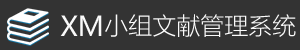
<style>
.page{position:relative;width:300px;height:50px;background:#333333}
.page>*{position:absolute;margin:0}
.t1{font:27px "MicrosoftYaHeiUI";color:#fafafa}
.t2{font:24px "MicrosoftYaHeiUILight";color:#fafafa}
</style>
<div class="page">
<p class="t1" style="left:60px;top:15px;width:42px;height:21px">XM</p>
<p class="t2" style="left:105px;top:14px;width:191px;height:23px">小组文献管理系统</p>
</div>
